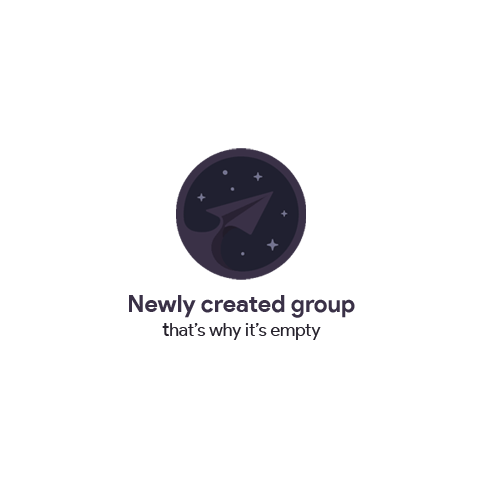
<style>
.page{position:relative;width:485px;height:488px;background:#ffffff}
.page>*{position:absolute;margin:0}
.t1{font:17.8px "ProductSans-Regular";color:#26222c}
.t2{font:23.8px "ProductSans-Bold";color:#3a3147}
.t3{font:19.8px "ProductSans-Regular";color:#26222c}
</style>
<div class="page">
<p class="t1" style="left:129px;top:295px;width:226px;height:45px;text-align:center"><span class="t2">Newly created group<br></span><span class="t3">t</span>hat’s why it’s empty</p>
</div>
